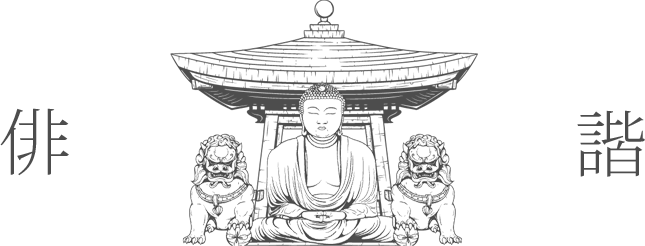
<style>
.page{position:relative;width:645px;height:246px;background:#ffffff}
.page>*{position:absolute;margin:0}
.t1{font:72px "KozMinPr6N-ExtraLight";color:#4d4d4d}
</style>
<div class="page">
<p class="t1" style="left:0px;top:108px;width:69px;height:68px">俳</p>
<p class="t1" style="left:577px;top:110px;width:68px;height:67px">諧</p>
</div>
